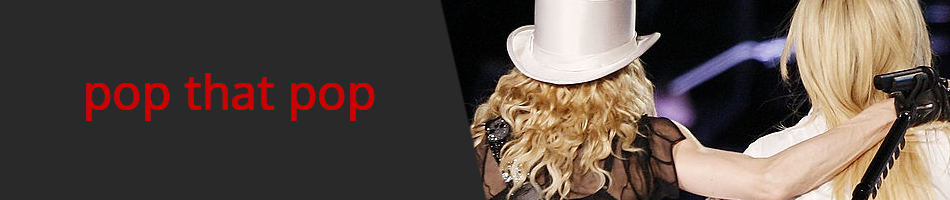
<style>
.page{position:relative;width:950px;height:200px;background:#292929}
.page>*{position:absolute;margin:0}
.t1{font:48px "Oxygen-Regular";color:#cd0000;font-weight:bold}
</style>
<div class="page">
<p class="t1" style="left:86px;top:73px;width:289px;height:48px">pop that pop</p>
</div>
